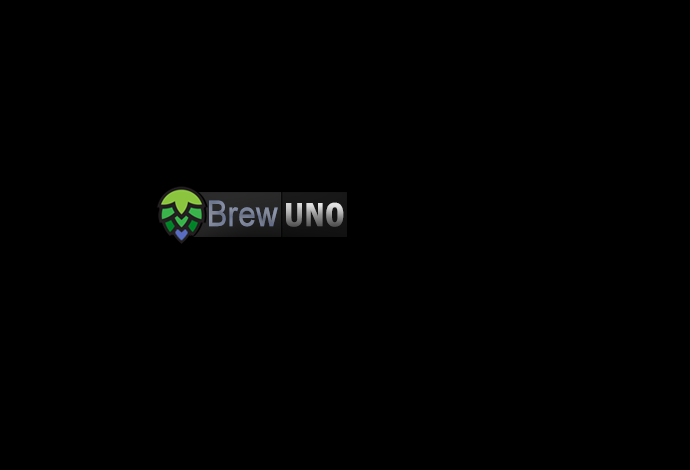
<style>
.page{position:relative;width:690px;height:470px;background:#000000}
.page>*{position:absolute;margin:0}
.t1{font:35.3px "ArialMT";color:#7a8298;font-weight:bold;scale:0.85 1}
.t2{font:34.5px "FranklinGothic-DemiCond";font-weight:bold}
</style>
<div class="page">
<p class="t1" style="left:209px;top:200px;width:69px;height:27px">Brew</p>
<p class="t2" style="left:286px;top:202px;width:58px;height:25px">UNO</p>
</div>
